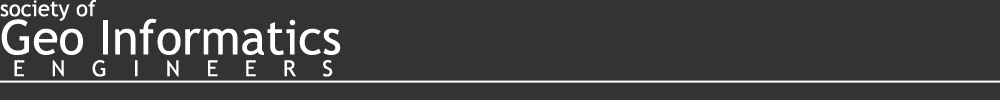
<style>
.page{position:relative;width:1000px;height:100px;background:#333333}
.page>*{position:absolute;margin:0}
.t1{font:22px "TrebuchetMS";color:#fffefe}
.t2{font:48px "TrebuchetMS";color:#ffffff}
.t3{font:22px "TrebuchetMS";color:#ffffff}
</style>
<div class="page">
<p class="t1" style="left:0px;top:0px;width:97px;height:21px">society of</p>
<p class="t2" style="left:1px;top:18px;width:340px;height:37px">Geo Informatics</p>
<p class="t3" style="left:14px;top:60px;width:319px;height:17px">E    N    G    I    N    E    E    R    S</p>
</div>
